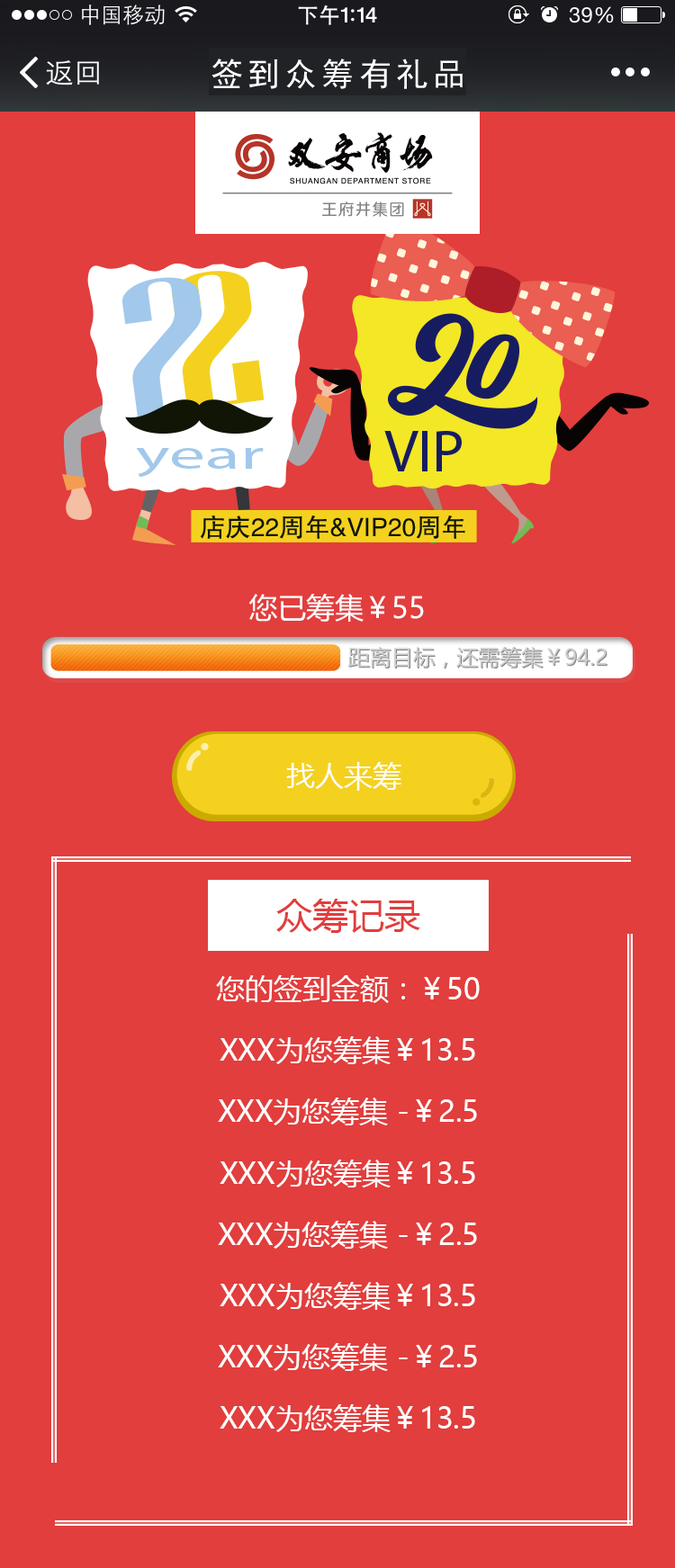
<style>
.page{position:relative;width:675px;height:1568px;background:#e13e3d}
.page>*{position:absolute;margin:0}
.t1{font:28.8px "MicrosoftYaHei";color:#ffffff}
.t2{font:36px "MicrosoftYaHei";color:#e13e3d}
.t3{font:28.8px/61.3px "MicrosoftYaHei";color:#ffffff}
</style>
<div class="page">
<p class="t1" style="left:248px;top:594px;width:176px;height:28px">您已筹集￥55</p>
<p class="t1" style="left:286px;top:762px;width:115px;height:29px">找人来筹</p>
<p class="t2" style="left:276px;top:899px;width:144px;height:34px">众筹记录</p>
<p class="t3" style="left:216px;top:975px;width:263px;height:457px;text-align:center">您的签到金额：￥50<br>XXX为您筹集￥13.5<br>XXX为您筹集 -￥2.5<br>XXX为您筹集￥13.5<br>XXX为您筹集 -￥2.5<br>XXX为您筹集￥13.5<br>XXX为您筹集 -￥2.5<br>XXX为您筹集￥13.5<br>XXX为您筹集 -￥2.5</p>
</div>
